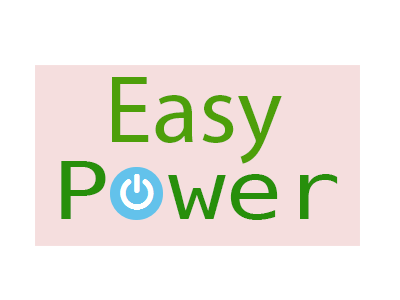
<style>
.page{position:relative;width:400px;height:300px;background:#ffffff}
.page>*{position:absolute;margin:0}
.t1{font:96px "MyriadPro-Regular";color:#4d9f0a}
.t2{font:80px "BitstreamVeraSansMono-Roman";color:#278f0b;scale:1.2 1}
</style>
<div class="page">
<p class="t1" style="left:112px;top:77px;width:170px;height:87px">Easy</p>
<p class="t2" style="left:61px;top:161px;width:277px;height:59px">P wer</p>
</div>
